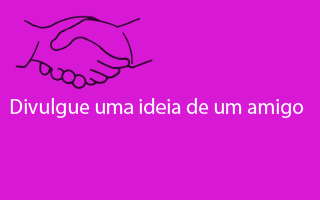
<style>
.page{position:relative;width:320px;height:200px;background:#d718d5}
.page>*{position:absolute;margin:0}
.t1{font:21.3px "MyriadPro-Regular";color:#fdfdfd}
</style>
<div class="page">
<p class="t1" style="left:10px;top:98px;width:294px;height:20px">Divulgue uma ideia de um amigo</p>
</div>
